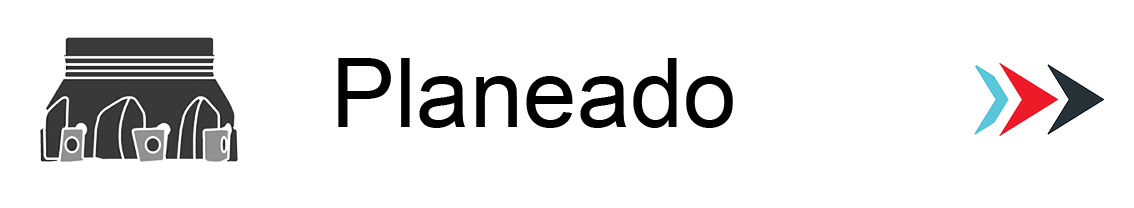
<style>
.page{position:relative;width:1134px;height:208px;background:#ffffff}
.page>*{position:absolute;margin:0}
.t1{font:96px "ArialMT";color:#000000}
</style>
<div class="page">
<p class="t1" style="left:338px;top:58px;width:395px;height:70px">Planeado</p>
</div>
